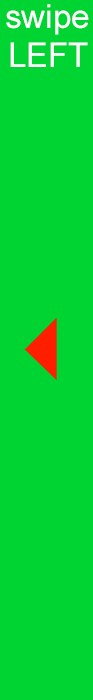
<style>
.page{position:relative;width:93px;height:700px;background:#00d432}
.page>*{position:absolute;margin:0}
.t1{font:33.3px "ArialMT";color:#ffffff}
.t2{font:34.1px "ArialMT";color:#ffffff;scale:0.96 1}
</style>
<div class="page">
<p class="t1" style="left:6px;top:4px;width:83px;height:31px">swipe</p>
<p class="t2" style="left:10px;top:42px;width:78px;height:25px">LEFT</p>
</div>
